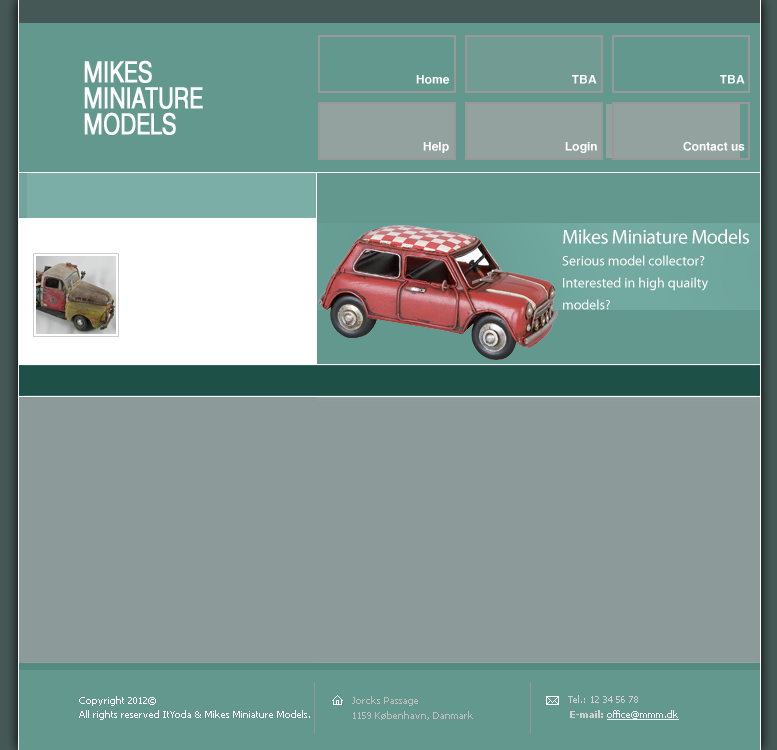
<style>
.page{position:relative;width:777px;height:750px;background:#8c9b99}
.page>*{position:absolute;margin:0}
.t1{font:28px/26px "Pragmatica-Condensed";letter-spacing:-0.025em;color:#ffffff;text-transform:uppercase;font-weight:bold}
.t2{font:12px "Helvetica_cyr-Bold";color:#ffffff}
.t3{font:14px/22px "MyriadPro-Regular";color:#ffffff}
.t4{font:20px/22px "MyriadPro-Regular";letter-spacing:-0.025em;color:#ffffff}
.t5{font:16px/22px "MyriadPro-Regular";color:#ffffff}
.t6{font:10px/14px "Tahoma";color:#ffffff}
.t7{font:10px/15px "Tahoma";color:#bebebe}
.t8{font:10px/15px "Tahoma";color:#bebebe;font-weight:bold}
.t9{font:10px "Tahoma";color:#d2d0d0}
.t10{font:10px "Tahoma";color:#f1f1f1;text-decoration:underline}
.t11{font:10px "Tahoma-Bold";color:#d2d0d0}
</style>
<div class="page">
<p class="t1" style="left:84px;top:60px;width:119px;height:75px">Mikes <br>Miniature <br>Models</p>
<p class="t2" style="left:416px;top:75px;width:34px;height:9px">Home</p>
<p class="t2" style="left:572px;top:75px;width:25px;height:9px">TBA</p>
<p class="t2" style="left:720px;top:75px;width:25px;height:9px">TBA</p>
<p class="t2" style="left:423px;top:142px;width:26px;height:11px">Help</p>
<p class="t2" style="left:565px;top:142px;width:32px;height:11px">Login</p>
<p class="t2" style="left:683px;top:141px;width:62px;height:10px">Contact us</p>
<p class="t3" style="left:562px;top:229px;width:187px;height:81px"><span class="t4">Mikes Miniature Models<br></span>Serious model collector?<br>Interested in high quailty <br>models?<br><span class="t5"><br>hgfcgh</span></p>
<p class="t6" style="left:79px;top:696px;width:231px;height:24px">Copyright 2012© <br>All rights reserved ItYoda &amp; Mikes Miniature Models.</p>
<p class="t7" style="left:352px;top:696px;width:121px;height:24px"><span class="t8"><br><br></span>Jorcks Passage<br>1159 København, Danmark</p>
<p class="t9" style="left:568px;top:695px;width:70px;height:8px">Tel.: 12 34 56 78</p>
<p class="t10" style="left:570px;top:710px;width:109px;height:10px"><span class="t11">E-mail: </span>office@mmm.dk</p>
</div>
